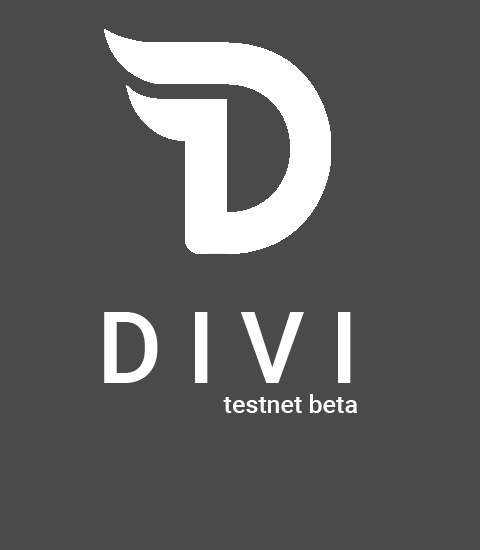
<style>
.page{position:relative;width:480px;height:550px;background:#4a4a4a}
.page>*{position:absolute;margin:0}
.t1{font:100px "Roboto-Medium";color:#ffffff}
.t2{font:25px "Roboto-Medium";color:#ffffff}
</style>
<div class="page">
<p class="t1" style="left:104px;top:312px;width:247px;height:71px">D I V I</p>
<p class="t2" style="left:223px;top:394px;width:134px;height:19px">testnet beta</p>
</div>
